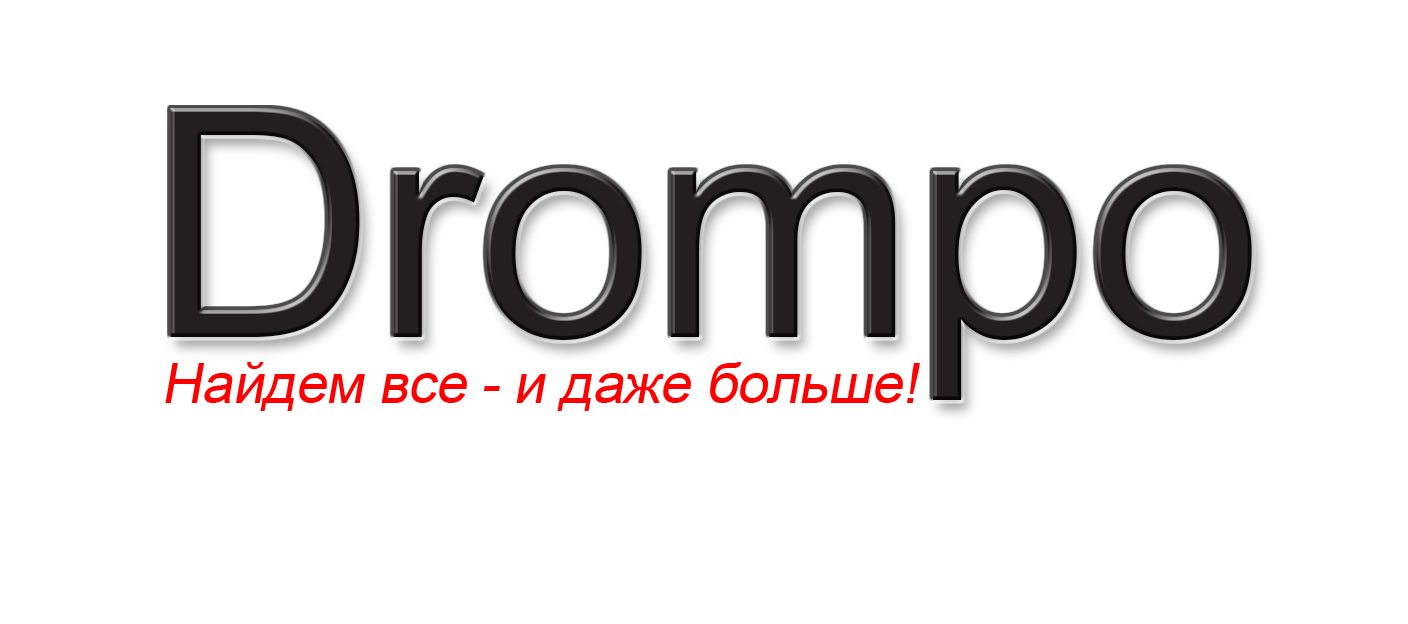
<style>
.page{position:relative;width:1408px;height:624px;background:#ffffff}
.page>*{position:absolute;margin:0}
.t1{font:318.7px "ArialMT";letter-spacing:-0.01em;color:#231f20}
.t2{font:55.8px "ArialMT";letter-spacing:-0.01em;color:#ff0000;font-style:italic}
</style>
<div class="page">
<p class="t1" style="left:170px;top:108px;width:1082px;height:292px">Drompo</p>
<p class="t2" style="left:165px;top:362px;width:755px;height:49px">Найдем все - и даже больше!</p>
</div>
